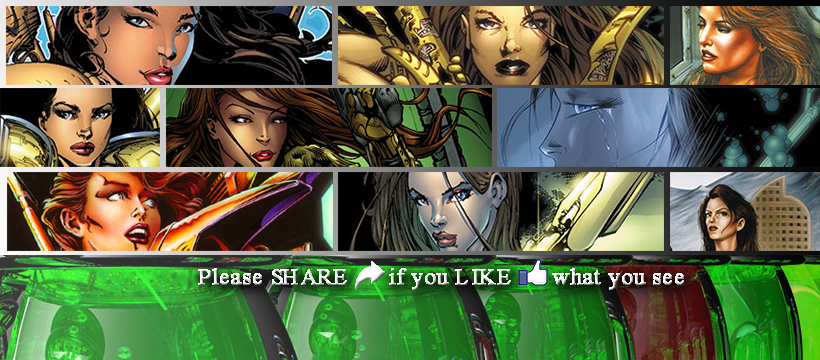
<style>
.page{position:relative;width:820px;height:360px}
.page>*{position:absolute;margin:0}
.t1{font:23.1px "TimesNewRomanPSMT";font-weight:bold}
</style>
<div class="page">
<p class="t1" style="left:198px;top:268px;width:486px;height:22px">Please SHARE      if you LIKE      what you see</p>
</div>
